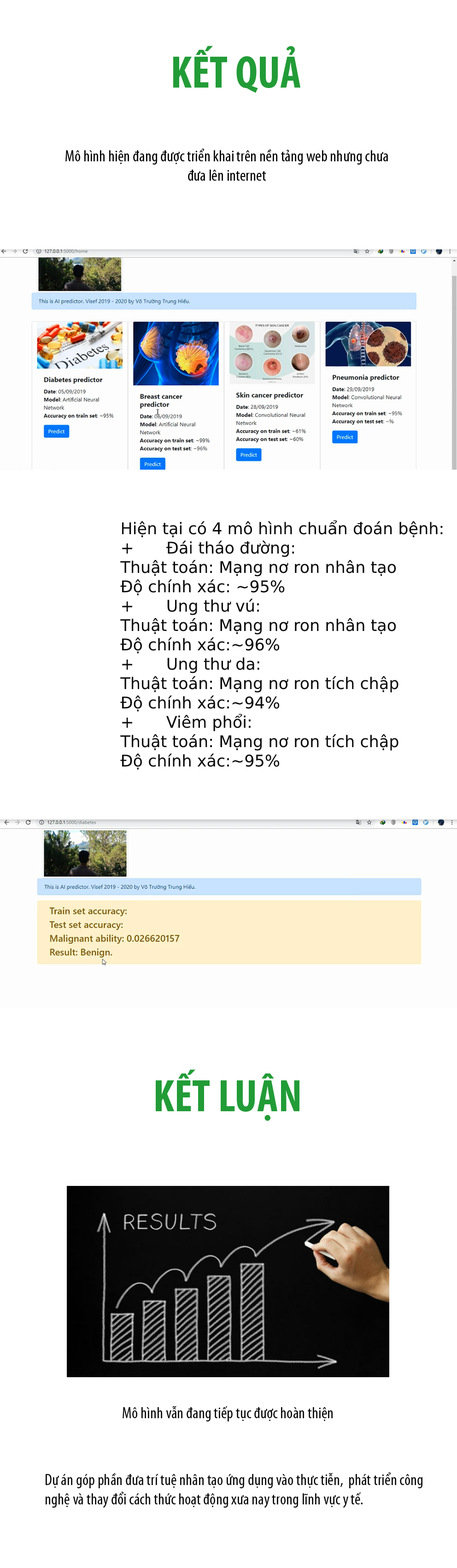
<style>
.page{position:relative;width:457px;height:1568px;background:#ffffff}
.page>*{position:absolute;margin:0}
.t1{font:46.1px "MyriadPro-BoldCond";color:#229c37}
.t2{font:16.1px "MyriadPro-Cond";color:#000000}
.t3{font:16.1px "MyriadPro-Cond";color:#090909}
</style>
<div class="page">
<p class="t1" style="left:173px;top:46px;width:128px;height:47px">KẾT QUẢ</p>
<p class="t2" style="left:65px;top:148px;width:323px;height:33px;text-align:center">Mô hình hiện đang được triển khai trên nền tảng web nhưng chưa đưa lên internet</p>
<p class="t3" style="left:120px;top:520px;width:323px;height:250px">Hiện tại có 4 mô hình chuẩn đoán bệnh:<br>+ Đái tháo đường:<br>Thuật toán: Mạng nơ ron nhân tạo<br>Độ chính xác: ~95%<br>+ Ung thư vú:<br>Thuật toán: Mạng nơ ron nhân tạo<br>Độ chính xác:~96%<br>+ Ung thư da:<br>Thuật toán: Mạng nơ ron tích chập<br>Độ chính xác:~94%<br>+ Viêm phổi:<br>Thuật toán: Mạng nơ ron tích chập<br>Độ chính xác:~95%</p>
<p class="t1" style="left:156px;top:1069px;width:144px;height:52px">KẾT LUẬN</p>
<p class="t3" style="left:123px;top:1406px;width:210px;height:15px">Mô hình vẫn đang tiếp tục được hoàn thiện</p>
<p class="t3" style="left:46px;top:1472px;width:377px;height:36px">Dự án góp phần đưa trí tuệ nhân tạo ứng dụng vào thực tiễn,  phát triển công nghệ và thay đổi cách thức hoạt động xưa nay trong lĩnh vực y tế.</p>
</div>
